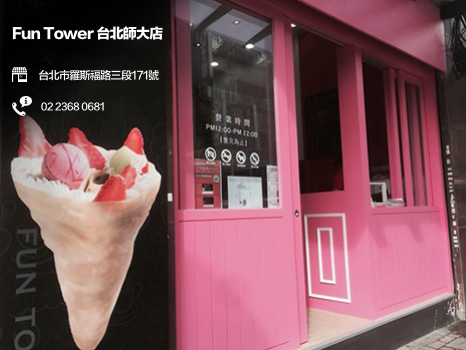
<style>
.page{position:relative;width:466px;height:350px}
.page>*{position:absolute;margin:0}
.t1{font:14px/31px "FZLTTHB--B51-0";letter-spacing:-0.06em;color:#fffefe}
.t2{font:11px/0px "FZLTZHB--B51-0";letter-spacing:-0.06em;color:#fffefe}
.t3{font:10px/0px "FZLTZHB--B51-0";letter-spacing:-0.06em;color:#fffefe}
</style>
<div class="page">
<p class="t1" style="left:12px;top:26px;width:151px;height:85px">Fun Tower 台北師大店<br>          <span class="t2">台北市羅斯福路三段171號<br>           </span><span class="t3">02 2368 0681</span></p>
</div>
